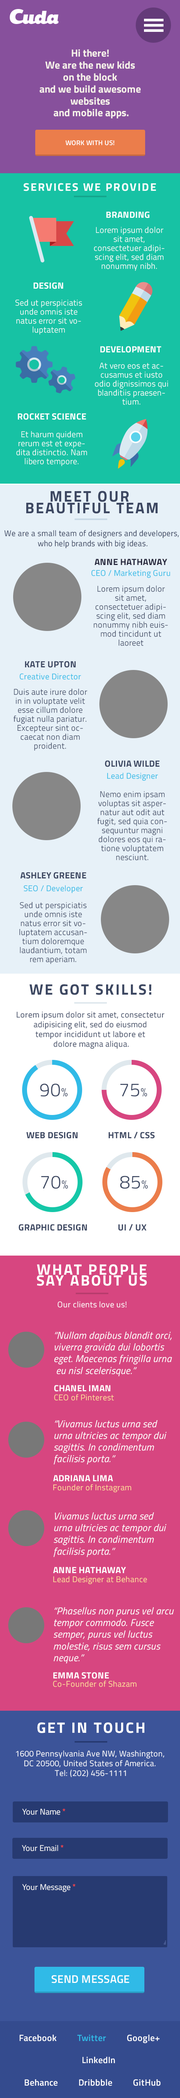
<style>
.page{position:relative;width:180px;height:2098px}
.page>*{position:absolute;margin:0}
.t1{font:10.3px/11.9px "TitilliumWeb-Bold";color:#f7f3ea}
.t2{font:6.7px "TitilliumWeb-SemiBold";letter-spacing:0.02em;color:#ffffff}
.t3{font:11.1px "TitilliumWeb-Bold";letter-spacing:0.1em;color:#ffffff}
.t4{font:9px "TitilliumWeb-Bold";letter-spacing:0.02em;color:#ffffff;text-transform:uppercase}
.t5{font:8.2px/9px "TitilliumWeb-Light";letter-spacing:0.02em;color:#ffffff}
.t6{font:15.5px/11.6px "TitilliumWeb-Bold";letter-spacing:0.1em;color:#3c4761;scale:0.97 1}
.t7{font:8.3px/10.1px "TitilliumWeb-Regular";letter-spacing:0.02em;color:#3c4761;scale:0.97 1}
.t8{font:9px "TitilliumWeb-Bold";letter-spacing:0.02em;color:#27283d;text-transform:uppercase}
.t9{font:8.2px "TitilliumWeb-Regular";letter-spacing:0.02em;color:#30bae7}
.t10{font:8.2px/9px "TitilliumWeb-Light";letter-spacing:0.02em;color:#3c4761}
.t11{font:9px "TitilliumWeb-Bold";letter-spacing:0.02em;color:#3c4761;text-transform:uppercase}
.t12{font:15px "TitilliumWeb-Bold";letter-spacing:0.1em;color:#3c4761}
.t13{font:8.2px/9.8px "TitilliumWeb-Regular";letter-spacing:0.02em;color:#3c4761}
.t14{font:18.7px "TitilliumWeb-Light";letter-spacing:0.02em;color:#3c4761;text-transform:uppercase}
.t15{font:12px "TitilliumWeb-Light";letter-spacing:0.02em;color:#3c4761;text-transform:uppercase}
.t16{font:15px/11.2px "TitilliumWeb-Bold";letter-spacing:0.1em;color:#ffffff}
.t17{font:8.2px "TitilliumWeb-Regular";letter-spacing:0.02em;color:#ffffff}
.t18{font:9.9px/11.7px "TitilliumWeb-Italic";letter-spacing:0.02em;color:#ffffff}
.t19{font:8.2px "TitilliumWeb-Regular";letter-spacing:0.02em;color:#ffdd99}
.t20{font:9px "TitilliumWeb-Bold";letter-spacing:0.02em;color:#ffffff}
.t21{font:15px "TitilliumWeb-Bold";letter-spacing:0.1em;color:#ffffff}
.t22{font:8.2px/9.8px "TitilliumWeb-Regular";letter-spacing:0.02em;color:#ffffff}
.t23{font:8.2px "TitilliumWeb-Regular";color:#ffffff}
.t24{font:8.2px "ArialMT";color:#ff4444}
.t25{font:11.1px "TitilliumWeb-SemiBold";letter-spacing:0.02em;color:#ffffff}
.t26{font:9px/11.2px "TitilliumWeb-SemiBold";letter-spacing:0.02em;color:#ffffff}
.t27{font:9px/11.2px "TitilliumWeb-SemiBold";letter-spacing:0.02em;color:#30bae7}
</style>
<div class="page">
<p class="t1" style="left:39px;top:49px;width:102px;height:69px;text-align:center">Hi there! <br>We are the new kids <br>on the block <br>and we build awesome <br>websites <br>and mobile apps.</p>
<p class="t2" style="left:66px;top:140px;width:48px;height:6px">WORK WITH US!</p>
<p class="t3" style="left:24px;top:183px;width:132px;height:8px">SERVICES WE PROVIDE</p>
<p class="t4" style="left:106px;top:212px;width:44px;height:6px">Branding</p>
<p class="t5" style="left:94px;top:226px;width:71px;height:45px;text-align:center">Lorem ipsum dolor sit amet, <br>consectetuer adipiscing elit, sed diam nonummy nibh.</p>
<p class="t4" style="left:33px;top:282px;width:30px;height:7px">Design</p>
<p class="t5" style="left:15px;top:299px;width:67px;height:36px;text-align:center">Sed ut perspiciatis unde omnis iste natus error sit voluptatem</p>
<p class="t4" style="left:100px;top:346px;width:61px;height:7px">Development</p>
<p class="t5" style="left:95px;top:363px;width:73px;height:42px;text-align:center">At vero eos et accusamus et iusto odio dignissimos qui blanditiis praesentium.</p>
<p class="t4" style="left:18px;top:413px;width:68px;height:7px">ROCKET SCIENCE</p>
<p class="t5" style="left:16px;top:431px;width:71px;height:35px;text-align:center">Et harum quidem rerum est et expedita distinctio. Nam libero tempore.</p>
<p class="t6" style="left:26px;top:491px;width:132px;height:23px;text-align:center">MEET OUR <br>BEAUTIFUL TEAM</p>
<p class="t7" style="left:4px;top:530px;width:175px;height:19px;text-align:center">We are a small team of designers and developers, <br>who help brands with big ideas.</p>
<p class="t8" style="left:94px;top:559px;width:73px;height:6px">ANNE HATHAWAY</p>
<p class="t9" style="left:91px;top:570px;width:79px;height:8px">CEO / Marketing Guru</p>
<p class="t10" style="left:94px;top:585px;width:74px;height:61px;text-align:center">Lorem ipsum dolor sit amet, <br>consectetuer adipiscing elit, sed diam nonummy nibh euismod tincidunt ut laoreet</p>
<p class="t11" style="left:25px;top:661px;width:51px;height:7px">Kate Upton</p>
<p class="t9" style="left:20px;top:674px;width:61px;height:6px">Creative Director</p>
<p class="t10" style="left:14px;top:688px;width:73px;height:63px;text-align:center">Duis aute irure dolor in in voluptate velit esse cillum dolore fugiat nulla pariatur. Excepteur sint occaecat non diam proident.</p>
<p class="t11" style="left:105px;top:760px;width:55px;height:7px">Olivia Wilde</p>
<p class="t9" style="left:107px;top:773px;width:51px;height:8px">Lead Designer</p>
<p class="t10" style="left:97px;top:791px;width:70px;height:70px;text-align:center">Nemo enim ipsam voluptas sit aspernatur aut odit aut fugit, sed quia consequuntur magni dolores eos qui ratione voluptatem nesciunt.</p>
<p class="t11" style="left:20px;top:872px;width:66px;height:7px">Ashley Greene</p>
<p class="t9" style="left:24px;top:885px;width:59px;height:9px">SEO / Developer</p>
<p class="t10" style="left:19px;top:902px;width:68px;height:62px;text-align:center">Sed ut perspiciatis unde omnis iste natus error sit voluptatem accusantium doloremque laudantium, totam rem aperiam.</p>
<p class="t12" style="left:29px;top:984px;width:123px;height:11px">WE GOT SKILLS!</p>
<p class="t13" style="left:16px;top:1012px;width:149px;height:37px;text-align:center">Lorem ipsum dolor sit amet, consectetur <br>adipisicing elit, sed do eiusmod <br>tempor incididunt ut labore et <br>dolore magna aliqua.</p>
<p class="t14" style="left:40px;top:1084px;width:28px;height:13px">90<span class="t15">%</span></p>
<p class="t14" style="left:120px;top:1084px;width:27px;height:13px">75<span class="t15">%</span></p>
<p class="t11" style="left:26px;top:1132px;width:52px;height:7px">Web Design</p>
<p class="t11" style="left:108px;top:1132px;width:47px;height:7px">HTML / CSS</p>
<p class="t14" style="left:41px;top:1176px;width:27px;height:13px">70<span class="t15">%</span></p>
<p class="t14" style="left:120px;top:1176px;width:28px;height:13px">85<span class="t15">%</span></p>
<p class="t11" style="left:19px;top:1224px;width:68px;height:7px">GRAPHIC DESIGN</p>
<p class="t11" style="left:118px;top:1224px;width:29px;height:7px">UI / UX</p>
<p class="t16" style="left:37px;top:1264px;width:110px;height:22px;text-align:center">WHAT PEOPLE<br>SAY ABOUT US</p>
<p class="t17" style="left:57px;top:1302px;width:70px;height:6px">Our clients love us!</p>
<p class="t18" style="left:54px;top:1332px;width:118px;height:45px">“Nullam dapibus blandit orci, viverra gravida dui lobortis <br>eget. Maecenas fringilla urna<br> eu nisl scelerisque.”</p>
<p class="t4" style="left:54px;top:1385px;width:57px;height:7px">Chanel Iman</p>
<p class="t19" style="left:54px;top:1394px;width:60px;height:7px">CEO of Pinterest</p>
<p class="t18" style="left:54px;top:1420px;width:112px;height:45px">“Vivamus luctus urna sed <br>urna ultricies ac tempor dui <br>sagittis. In condimentum <br>facilisis porta.”</p>
<p class="t20" style="left:53px;top:1475px;width:60px;height:7px">ADRIANA LIMA</p>
<p class="t19" style="left:53px;top:1484px;width:78px;height:9px">Founder of Instagram</p>
<p class="t18" style="left:53px;top:1512px;width:113px;height:46px">Vivamus luctus urna sed <br>urna ultricies ac tempor dui <br>sagittis. In condimentum <br>facilisis porta.”</p>
<p class="t19" style="left:53px;top:1576px;width:94px;height:9px">Lead Designer at Behance</p>
<p class="t4" style="left:53px;top:1567px;width:73px;height:7px">ANNE HATHAWAY</p>
<p class="t18" style="left:53px;top:1607px;width:121px;height:57px">“Phasellus non purus vel arcu <br>tempor commodo. Fusce <br>semper, purus vel luctus <br>molestie, risus sem cursus <br>neque.”</p>
<p class="t4" style="left:53px;top:1672px;width:56px;height:7px">EMMA STONE</p>
<p class="t19" style="left:53px;top:1681px;width:83px;height:7px">Co-Founder of Shazam</p>
<p class="t21" style="left:37px;top:1723px;width:107px;height:11px">GET IN TOUCH</p>
<p class="t22" style="left:16px;top:1751px;width:148px;height:27px;text-align:center">1600 Pennsylvania Ave NW, Washington, <br>DC 20500, United States of America. <br>Tel: (202) 456-1111</p>
<p class="t23" style="left:22px;top:1809px;width:43px;height:6px">Your Name <span class="t24">*</span></p>
<p class="t23" style="left:22px;top:1845px;width:41px;height:7px">Your Email <span class="t24">*</span></p>
<p class="t23" style="left:22px;top:1884px;width:53px;height:9px">Your Message <span class="t24">*</span></p>
<p class="t25" style="left:51px;top:1976px;width:78px;height:8px">SEND MESSAGE</p>
<p class="t26" style="left:20px;top:2035px;width:140px;height:51px;text-align:center">Facebook          <span class="t27">Twitter</span>          Google+ <br><br>         LinkedIn <br><br>         Behance          Dribbble          GitHub</p>
</div>
